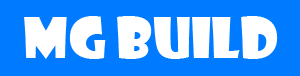
<style>
.page{position:relative;width:300px;height:76px;background:#007bff}
.page>*{position:absolute;margin:0}
.t1{font:54.5px "ShowcardGothic-Reg";color:#ffffff}
</style>
<div class="page">
<p class="t1" style="left:24px;top:16px;width:254px;height:43px">MG BUILD</p>
</div>
